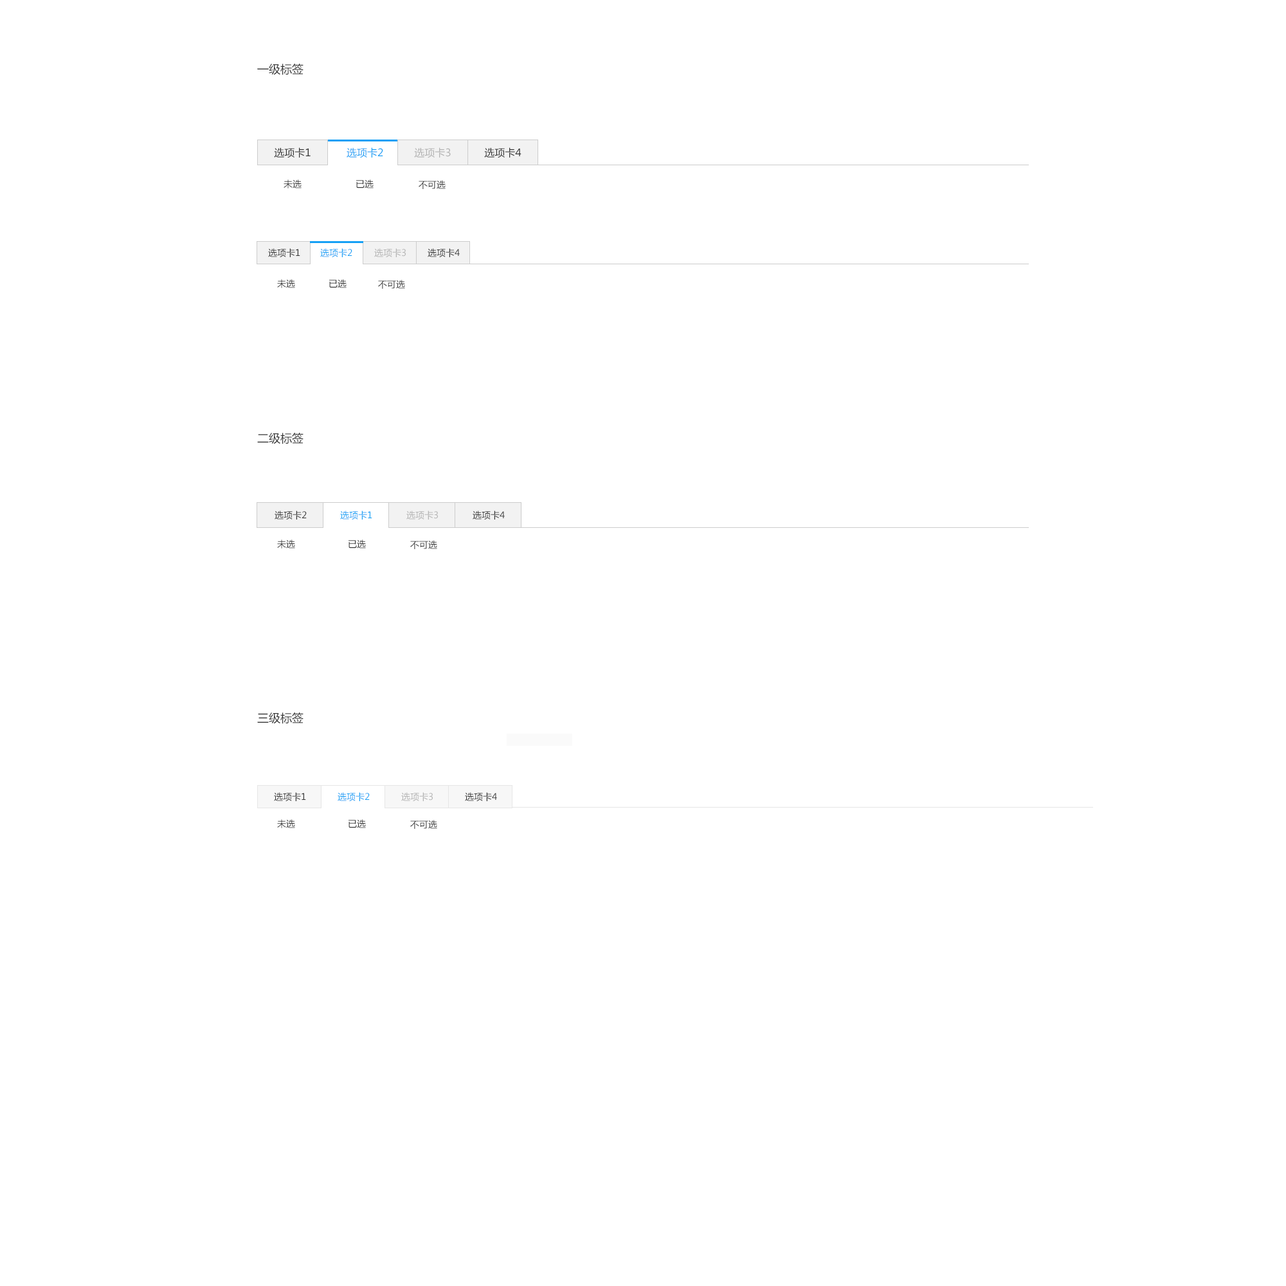
<style>
.page{position:relative;width:1286px;height:1286px;background:#ffffff}
.page>*{position:absolute;margin:0}
.t1{font:11.6px "MicrosoftYaHei";color:#333333}
.t2{font:10.3px "MicrosoftYaHei";color:#333333}
.t3{font:10.3px "MicrosoftYaHei";color:#15a0f5}
.t4{font:10.3px "MicrosoftYaHei";color:#b3b3b3}
.t5{font:9px "MicrosoftYaHei";color:#333333}
.t6{font:9px "MicrosoftYaHei";color:#15a0f5}
.t7{font:9px "MicrosoftYaHei";color:#b3b3b3}
</style>
<div class="page">
<p class="t1" style="left:257px;top:64px;width:46px;height:11px">一级标签</p>
<p class="t2" style="left:274px;top:147px;width:36px;height:11px">选项卡1</p>
<p class="t3" style="left:346px;top:147px;width:37px;height:11px">选项卡2</p>
<p class="t4" style="left:414px;top:147px;width:37px;height:11px">选项卡3</p>
<p class="t2" style="left:484px;top:147px;width:37px;height:11px">选项卡4</p>
<p class="t5" style="left:284px;top:179px;width:18px;height:9px">未选</p>
<p class="t5" style="left:356px;top:179px;width:18px;height:9px">已选</p>
<p class="t5" style="left:419px;top:180px;width:27px;height:9px">不可选</p>
<p class="t5" style="left:268px;top:248px;width:32px;height:9px">选项卡1</p>
<p class="t6" style="left:320px;top:248px;width:32px;height:9px">选项卡2</p>
<p class="t7" style="left:374px;top:248px;width:32px;height:9px">选项卡3</p>
<p class="t5" style="left:428px;top:248px;width:32px;height:9px">选项卡4</p>
<p class="t5" style="left:277px;top:279px;width:18px;height:9px">未选</p>
<p class="t5" style="left:329px;top:279px;width:17px;height:9px">已选</p>
<p class="t5" style="left:378px;top:280px;width:27px;height:9px">不可选</p>
<p class="t1" style="left:257px;top:433px;width:46px;height:11px">二级标签</p>
<p class="t5" style="left:274px;top:510px;width:33px;height:9px">选项卡2</p>
<p class="t6" style="left:340px;top:510px;width:32px;height:9px">选项卡1</p>
<p class="t7" style="left:406px;top:510px;width:32px;height:9px">选项卡3</p>
<p class="t5" style="left:473px;top:510px;width:32px;height:9px">选项卡4</p>
<p class="t5" style="left:277px;top:539px;width:18px;height:9px">未选</p>
<p class="t5" style="left:348px;top:539px;width:18px;height:9px">已选</p>
<p class="t5" style="left:410px;top:540px;width:27px;height:9px">不可选</p>
<p class="t1" style="left:257px;top:712px;width:46px;height:12px">三级标签</p>
<p class="t5" style="left:274px;top:792px;width:32px;height:9px">选项卡1</p>
<p class="t6" style="left:338px;top:792px;width:32px;height:9px">选项卡2</p>
<p class="t7" style="left:401px;top:792px;width:32px;height:9px">选项卡3</p>
<p class="t5" style="left:465px;top:792px;width:32px;height:9px">选项卡4</p>
<p class="t5" style="left:277px;top:819px;width:18px;height:9px">未选</p>
<p class="t5" style="left:348px;top:819px;width:18px;height:9px">已选</p>
<p class="t5" style="left:410px;top:820px;width:27px;height:9px">不可选</p>
</div>
